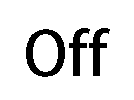
<style>
.page{position:relative;width:134px;height:100px;background:#ffffff}
.page>*{position:absolute;margin:0}
.t1{font:60px "AdobeFanHeitiStd-Bold";color:#000000}
</style>
<div class="page">
<p class="t1" style="left:26px;top:28px;width:84px;height:49px">Off</p>
</div>
